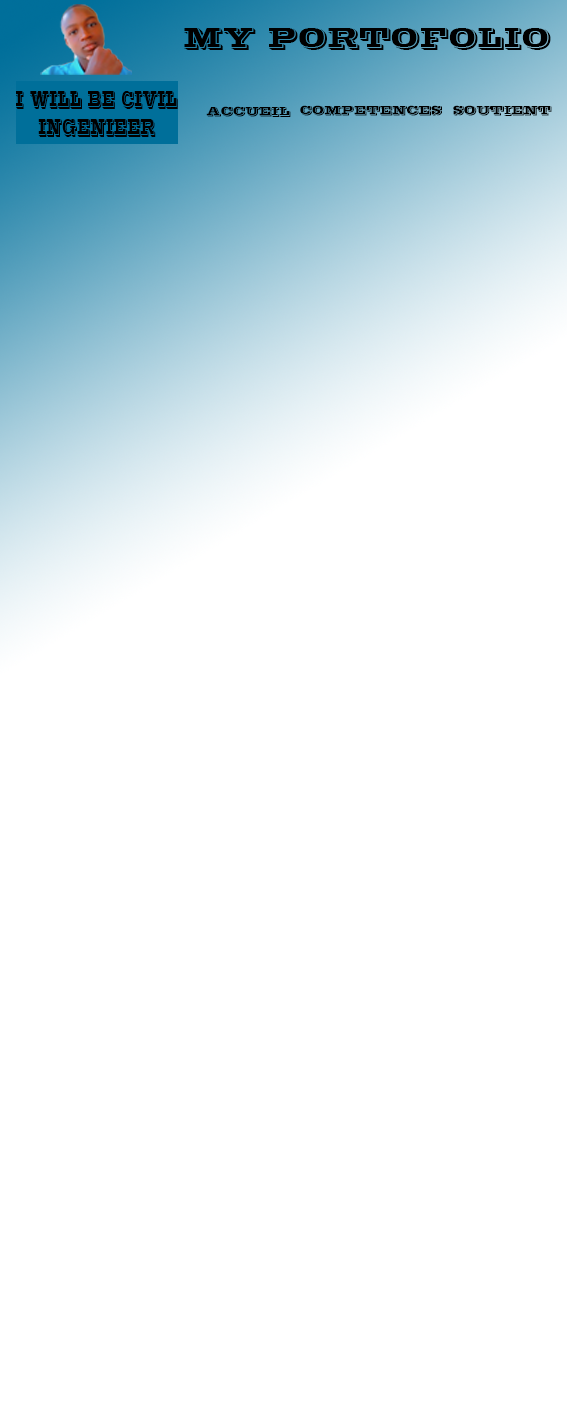
<style>
.page{position:relative;width:567px;height:1417px;background:#ffffff}
.page>*{position:absolute;margin:0}
.t1{font:28px "VinetaBT-Regular";color:#000000}
.t2{font:22.9px "VinetaBT-Regular";color:#000000;scale:0.57 1}
.t3{font:12px "VinetaBT-Regular";color:#000000}
</style>
<div class="page">
<p class="t1" style="left:184px;top:28px;width:367px;height:22px">MY PORTOFOLIO</p>
<p class="t2" style="left:16px;top:91px;width:162px;height:46px;text-align:center">I WILL BE CIVIL INGENIEER</p>
<p class="t3" style="left:206px;top:106px;width:85px;height:11px">ACCUEIL</p>
<p class="t3" style="left:300px;top:105px;width:142px;height:11px">COMPETENCES</p>
<p class="t3" style="left:453px;top:105px;width:99px;height:11px">SOUTIENT</p>
</div>
